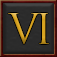
<style>
.page{position:relative;width:57px;height:57px}
.page>*{position:absolute;margin:0}
.t1{font:40px "TrajanPro-Regular";letter-spacing:-0.1em;color:#daa520}
</style>
<div class="page">
<p class="t1" style="left:8px;top:13px;width:41px;height:31px">VI</p>
</div>
